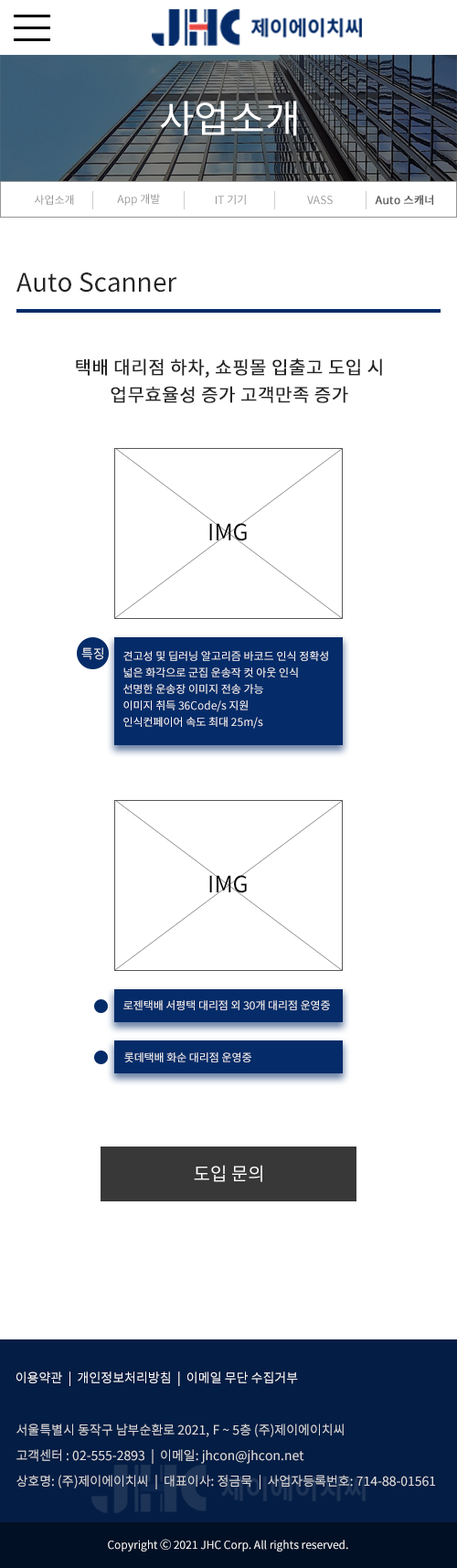
<style>
.page{position:relative;width:457px;height:1568px;background:#ffffff}
.page>*{position:absolute;margin:0}
.t1{font:38.4px "NotoSansKR-Regular";color:#ffffff}
.t2{font:11px "NotoSansKR-Regular";color:#959595}
.t3{font:11px "NotoSansKR-Regular";color:#595959;font-weight:bold}
.t4{font:25.6px "NotoSansKR-Regular";color:#242424}
.t5{font:18.3px/27.4px "NotoSansKR-Regular";color:#242424;font-weight:bold}
.t6{font:22.8px "NotoSansKR-Regular";color:#000000}
.t7{font:12.8px "NotoSansKR-Regular";color:#f5f5f5}
.t8{font:11px/16.5px "NotoSansKR-Regular";color:#f5f5f5}
.t9{font:11px "NotoSansKR-Regular";color:#f5f5f5}
.t10{font:18.3px "NotoSansKR-Regular";color:#ffffff}
.t11{font:12.8px "NotoSansKR-Regular";color:#ffffff}
.t12{font:12.8px/25.6px "NotoSansKR-Regular";color:#dddddd}
.t13{font:11px "NotoSansKR-Regular";color:#ffffff}
</style>
<div class="page">
<p class="t1" style="left:160px;top:101px;width:137px;height:35px">사업소개</p>
<p class="t2" style="left:34px;top:195px;width:40px;height:10px">사업소개</p>
<p class="t2" style="left:117px;top:194px;width:43px;height:12px">App 개발</p>
<p class="t2" style="left:216px;top:195px;width:30px;height:10px">IT 기기</p>
<p class="t2" style="left:307px;top:196px;width:26px;height:9px">VASS</p>
<p class="t3" style="left:375px;top:195px;width:58px;height:10px">Auto 스캐너</p>
<p class="t4" style="left:16px;top:272px;width:161px;height:21px">Auto Scanner</p>
<p class="t5" style="left:76px;top:358px;width:306px;height:45px;text-align:center">택배 대리점 하차, 쇼핑몰 입출고 도입 시 <br>업무효율성 증가 고객만족 증가</p>
<p class="t6" style="left:209px;top:523px;width:38px;height:18px">IMG</p>
<p class="t7" style="left:81px;top:647px;width:22px;height:13px">특징</p>
<p class="t8" style="left:123px;top:651px;width:205px;height:78px">견고성 및 딥러닝 알고리즘 바코드 인식 정확성<br>넓은 화각으로 군집 운송작 컷 아웃 인식<br>선명한 운송장 이미지 전송 가능<br>이미지 취득 36Code/s 지원<br>인식컨페이어 속도 최대 25m/s</p>
<p class="t6" style="left:209px;top:875px;width:38px;height:18px">IMG</p>
<p class="t9" style="left:123px;top:1000px;width:207px;height:10px">로젠택배 서평택 대리점 외 30개 대리점 운영중</p>
<p class="t9" style="left:124px;top:1052px;width:127px;height:10px">롯데택배 화순 대리점 운영중</p>
<p class="t10" style="left:194px;top:1165px;width:68px;height:17px">도입 문의</p>
<p class="t11" style="left:16px;top:1371px;width:282px;height:15px">이용약관  |  개인정보처리방침  |  이메일 무단 수집거부</p>
<p class="t12" style="left:16px;top:1424px;width:419px;height:65px">서울특별시 동작구 남부순환로 2021, F ~ 5층 (주)제이에이치씨<br>고객센터 : 02-555-2893  |  이메일: jhcon@jhcon.net<br>상호명: (주)제이에이치씨  |  대표이사: 정금묵  |  사업자등록번호: 714-88-01561</p>
<p class="t13" style="left:108px;top:1539px;width:240px;height:13px">Copyright Ⓒ 2021 JHC Corp. All rights reserved.</p>
</div>
